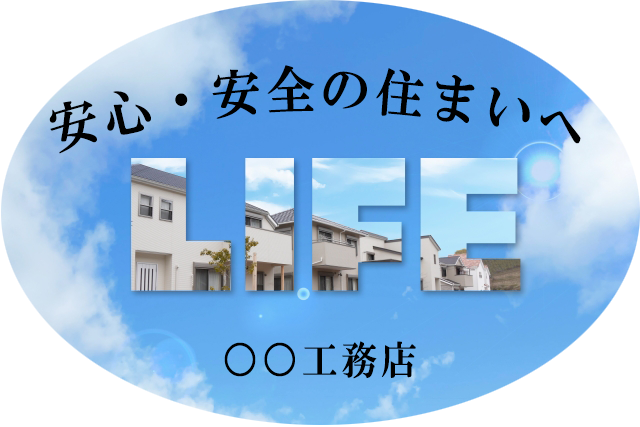
<style>
.page{position:relative;width:640px;height:427px;background:#ffffff}
.page>*{position:absolute;margin:0}
.t1{font:52.5px "HGMinchoE";letter-spacing:0.1em;color:#000000;scale:0.91 1}
.t2{font:39.6px "HGMinchoE";letter-spacing:0.1em;color:#000000;scale:0.91 1}
</style>
<div class="page">
<p class="t1" style="left:49px;top:65px;width:532px;height:89px">安心・安全の住まいへ</p>
<p class="t2" style="left:224px;top:341px;width:192px;height:38px">○○工務店</p>
</div>
